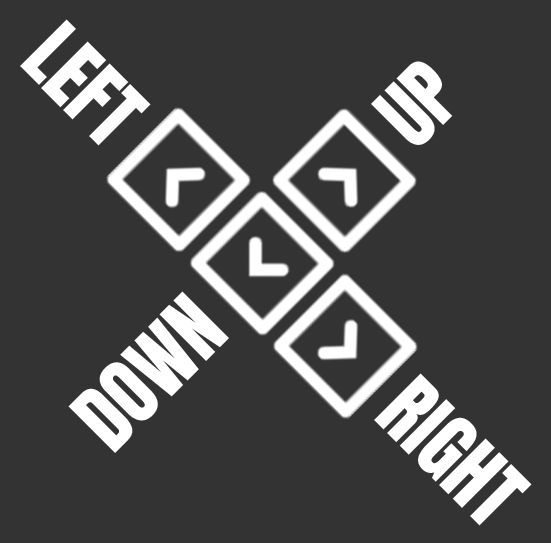
<style>
.page{position:relative;width:551px;height:543px;background:#333333}
.page>*{position:absolute;margin:0}
.t1{font:76.7px "Anton-Regular";color:#ffffff}
</style>
<div class="page">
<p class="t1" style="left:20px;top:19px;width:131px;height:127px;rotate:45deg">LEFT</p>
<p class="t1" style="left:371px;top:61px;width:82px;height:84px;rotate:-45deg">UP</p>
<p class="t1" style="left:68px;top:291px;width:161px;height:162px;rotate:-45deg">DOWN</p>
<p class="t1" style="left:374px;top:373px;width:158px;height:153px;rotate:45deg">RIGHT</p>
</div>
